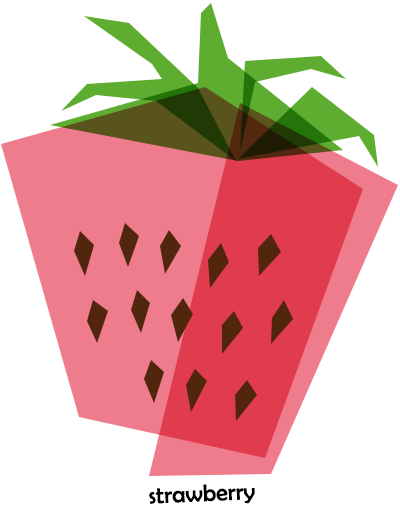
<style>
.page{position:relative;width:400px;height:522px;background:#ffffff}
.page>*{position:absolute;margin:0}
.t1{font:24px "BerlinSansFB-Reg";color:#000000}
</style>
<div class="page">
<p class="t1" style="left:149px;top:484px;width:106px;height:20px;rotate:-3deg">strawberry</p>
</div>
